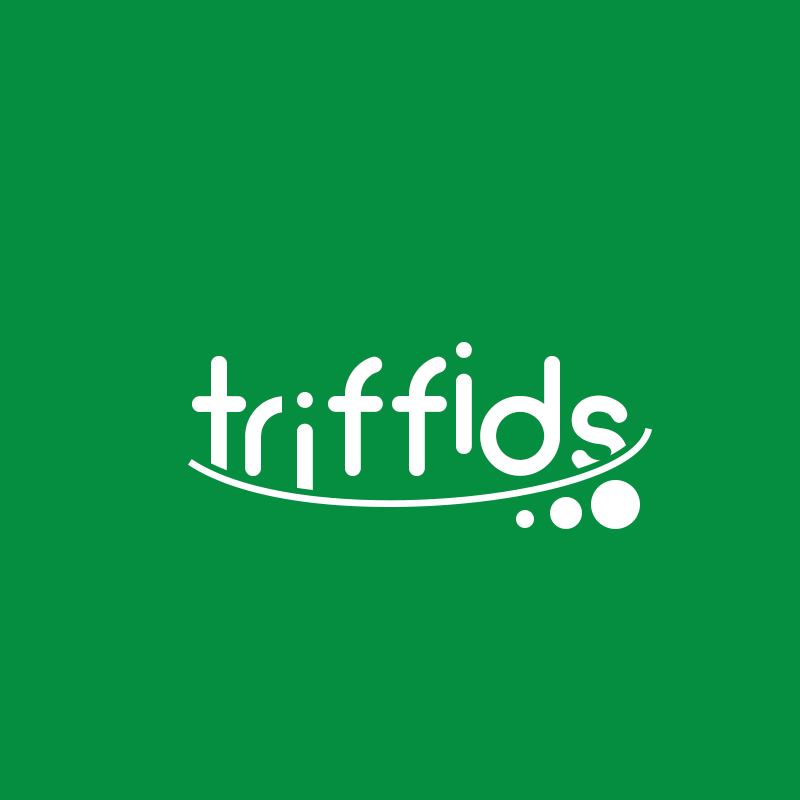
<style>
.page{position:relative;width:800px;height:800px;background:#058e3f}
.page>*{position:absolute;margin:0}
.t1{font:159.4px "Arciform";color:#ffffff}
</style>
<div class="page">
<p class="t1" style="left:456px;top:342px;width:16px;height:112px">i</p>
<p class="t1" style="left:192px;top:356px;width:436px;height:120px">triffids</p>
<p class="t1" style="left:297px;top:392px;width:16px;height:112px">i</p>
</div>
